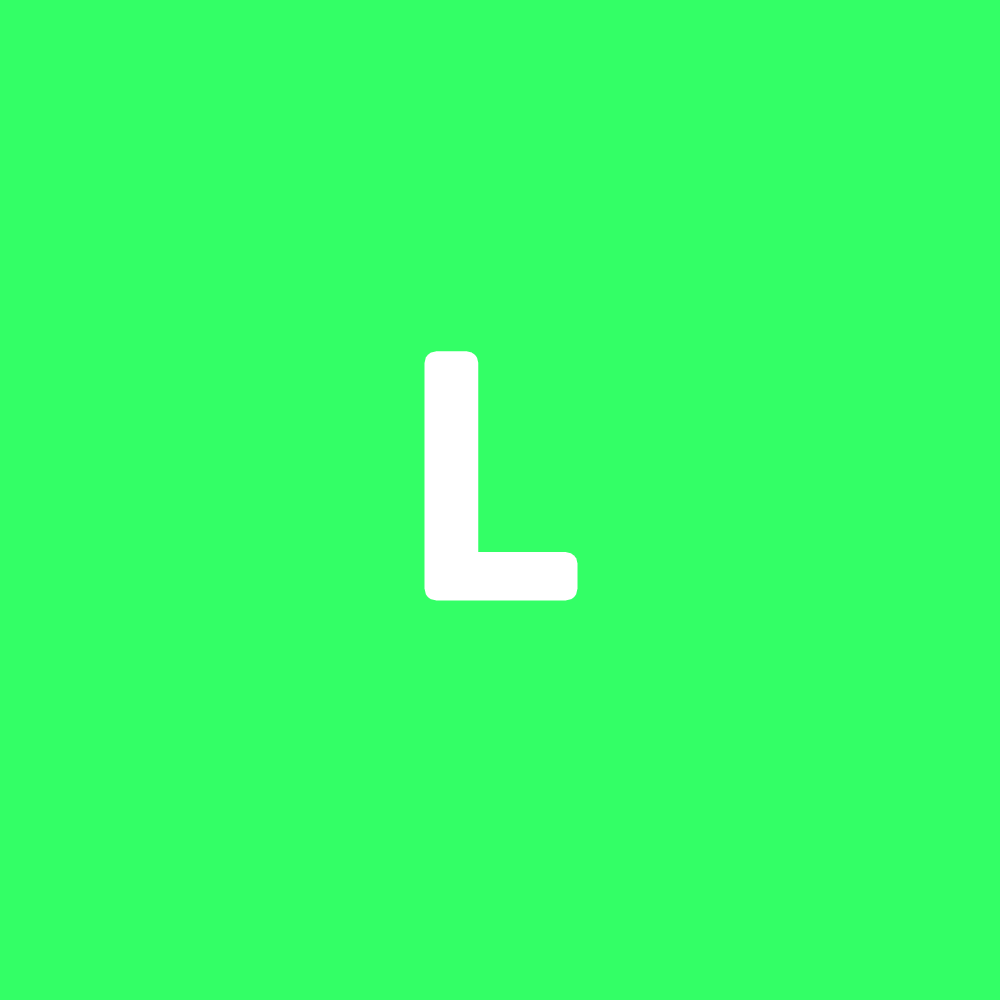
<style>
.page{position:relative;width:1000px;height:1000px;background:#33ff66}
.page>*{position:absolute;margin:0}
.t1{font:355.8px "Consolas";color:#ffffff}
</style>
<div class="page">
<p class="t1" style="left:435px;top:362px;width:132px;height:228px">L</p>
</div>
